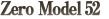
<style>
.page{position:relative;width:109px;height:19px;background:#ffffff}
.page>*{position:absolute;margin:0}
.t1{font:18px "RyuminPro-ExBold";letter-spacing:-0.08em;color:#4a3f32;font-weight:bold;scale:0.9 1}
</style>
<div class="page">
<p class="t1" style="left:0px;top:1px;width:101px;height:15px">Zero Model 52</p>
</div>
